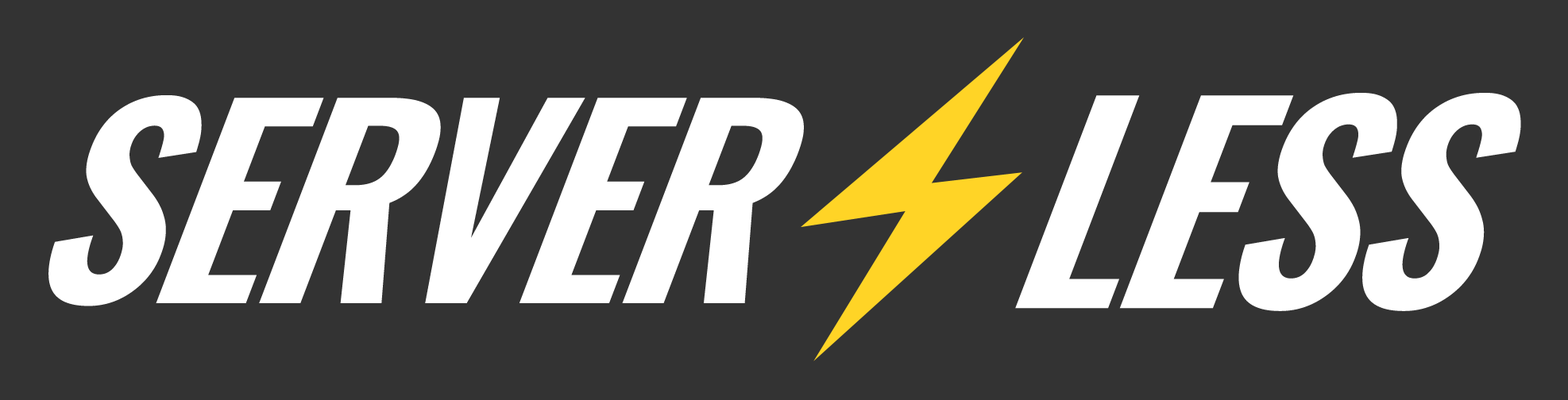
<style>
.page{position:relative;width:1568px;height:400px;background:#333333}
.page>*{position:absolute;margin:0}
.t1{font:263.2px "Oswald-Demi-BoldItalic";letter-spacing:-0.03em;color:#ffffff;scale:0.97 1}
.t2{font:272.6px "Oswald-Demi-BoldItalic";letter-spacing:-0.03em;color:#ffffff;scale:0.97 1}
</style>
<div class="page">
<p class="t1" style="left:48px;top:95px;width:756px;height:212px">SERVER</p>
<p class="t2" style="left:1015px;top:93px;width:506px;height:218px">LESS</p>
</div>
